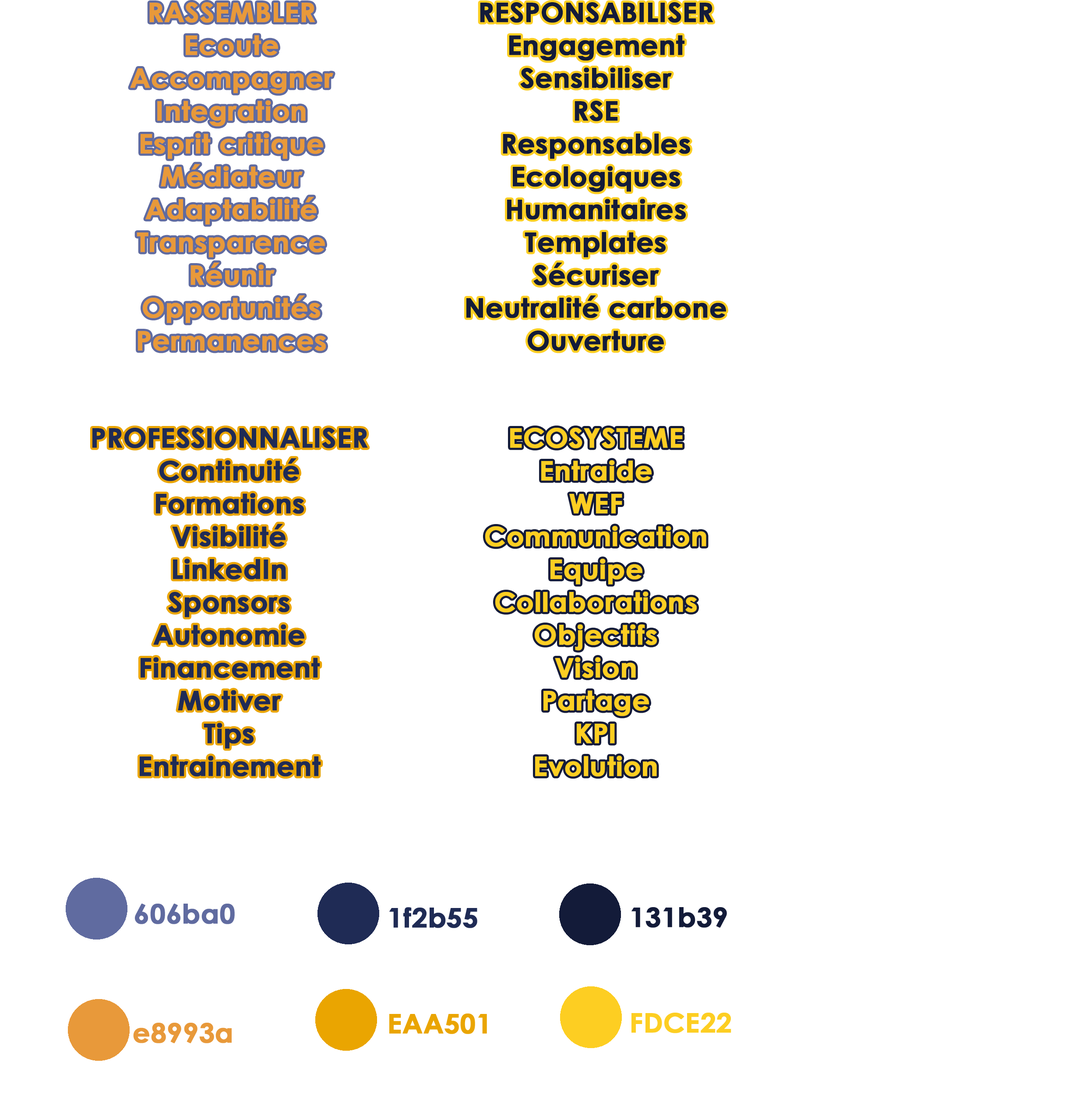
<style>
.page{position:relative;width:1086px;height:1098px;background:#ffffff}
.page>*{position:absolute;margin:0}
.t1{font:26.8px "CenturyGothic-Bold";color:#e8993a;font-weight:bold}
.t2{font:26.8px "CenturyGothic-Bold";color:#131b39;font-weight:bold}
.t3{font:26.8px "CenturyGothic-Bold";color:#1f2b55;font-weight:bold}
.t4{font:26.8px "CenturyGothic-Bold";color:#fdce22;font-weight:bold}
</style>
<div class="page">
<p class="t1" style="left:130px;top:2px;width:203px;height:349px;text-align:center">RASSEMBLER<br>Ecoute<br>Accompagner<br>Integration<br>Esprit critique<br>Médiateur<br>Adaptabilité<br>Transparence<br>Réunir<br>Opportunités<br>Permanences</p>
<p class="t2" style="left:466px;top:2px;width:260px;height:349px;text-align:center">RESPONSABILISER<br>Engagement<br>Sensibiliser<br>RSE<br>Responsables<br>Ecologiques<br>Humanitaires<br>Templates<br>Sécuriser<br>Neutralité carbone<br>Ouverture</p>
<p class="t3" style="left:92px;top:428px;width:276px;height:349px;text-align:center">PROFESSIONNALISER<br>Continuité<br>Formations<br>Visibilité<br>LinkedIn<br>Sponsors<br>Autonomie<br>Financement<br>Motiver<br>Tips<br>Entrainement</p>
<p class="t4" style="left:485px;top:428px;width:221px;height:349px;text-align:center">ECOSYSTEME<br>Entraide<br>WEF<br>Communication<br>Equipe<br>Collaborations<br>Objectifs<br>Vision<br>Partage<br>KPI<br>Evolution</p>
</div>
